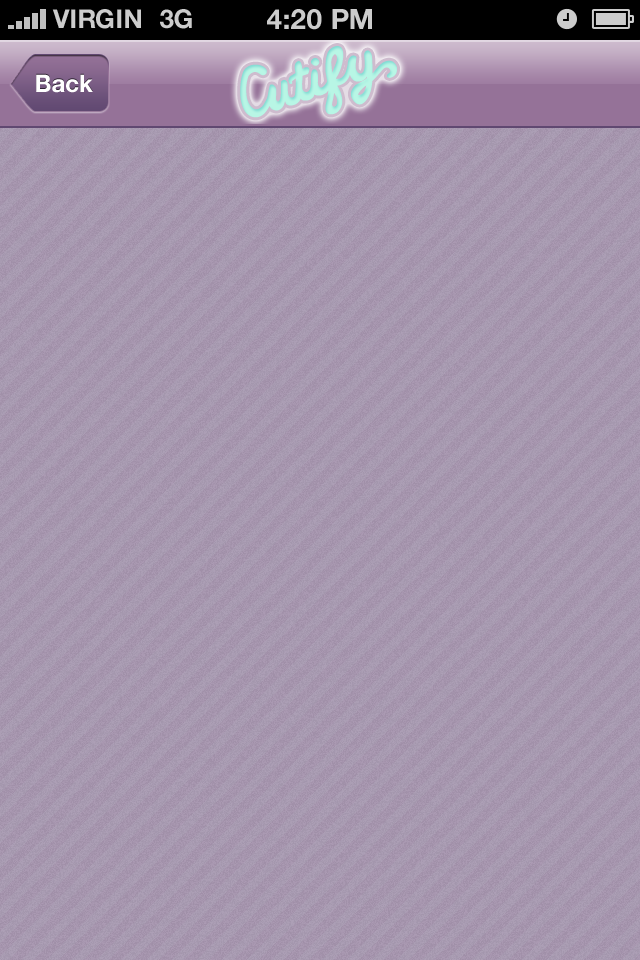
<style>
.page{position:relative;width:640px;height:960px}
.page>*{position:absolute;margin:0}
.t1{font:26px "HelveticaNeue-Bold";color:#cccccc;text-transform:uppercase}
.t2{font:28px "HelveticaNeue-Bold";color:#cccccc;text-transform:uppercase}
.t3{font:24px "HelveticaNeue-Bold";color:#ffffff}
</style>
<div class="page">
<p class="t1" style="left:52px;top:9px;width:89px;height:20px">VIRGIN</p>
<p class="t1" style="left:160px;top:9px;width:32px;height:20px">3G</p>
<p class="t2" style="left:267px;top:9px;width:105px;height:21px">4:20 pM</p>
<p class="t3" style="left:36px;top:74px;width:57px;height:19px">Back</p>
</div>
